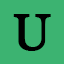
<style>
.page{position:relative;width:64px;height:64px;background:#3cb371}
.page>*{position:absolute;margin:0}
.t1{font:50px "Georgia";color:#000000;font-weight:bold}
</style>
<div class="page">
<p class="t1" style="left:13px;top:14px;width:38px;height:37px">U</p>
</div>
